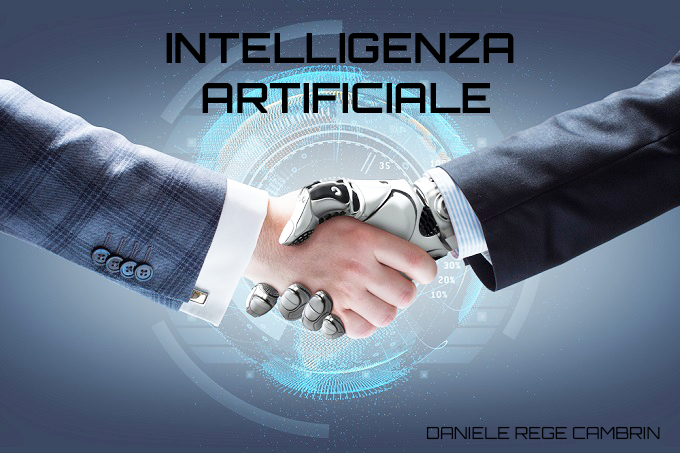
<style>
.page{position:relative;width:680px;height:453px}
.page>*{position:absolute;margin:0}
.t1{font:41.7px "Orbitron-Bold";color:#000000}
.t2{font:16.7px "Orbitron-Regular";color:#000000}
</style>
<div class="page">
<p class="t1" style="left:166px;top:33px;width:348px;height:80px">INTELLIGENZA <br> ARTIFICIALE</p>
<p class="t2" style="left:426px;top:426px;width:234px;height:14px">DANIELE REGE CAMBRIN</p>
</div>
